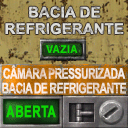
<style>
.page{position:relative;width:128px;height:128px}
.page>*{position:absolute;margin:0}
.t1{font:14.8px/16.6px "Arial-BoldMT";letter-spacing:0.007em;color:#dededa;text-transform:uppercase}
.t2{font:10.7px "Arial-BoldMT";color:#0dd903;text-transform:uppercase;scale:0.97 1}
.t3{font:14.7px/14.7px "Arial-BoldMT";letter-spacing:-0.08em;color:#eee2d9;text-transform:uppercase;scale:0.71 1}
.t4{font:16px "Arial-BoldMT";color:#0dd903;text-transform:uppercase;font-weight:bold;scale:0.7 1}
</style>
<div class="page">
<p class="t1" style="left:5px;top:6px;width:119px;height:29px;text-align:center">bacia de<br>refrigerante</p>
<p class="t2" style="left:46px;top:45px;width:32px;height:8px">vaziA</p>
<p class="t3" style="left:2px;top:65px;width:124px;height:29px;text-align:center">câmara PRESSURIZADA<br>bacia de refrigerante</p>
<p class="t4" style="left:6px;top:105px;width:50px;height:13px">abertA</p>
</div>
